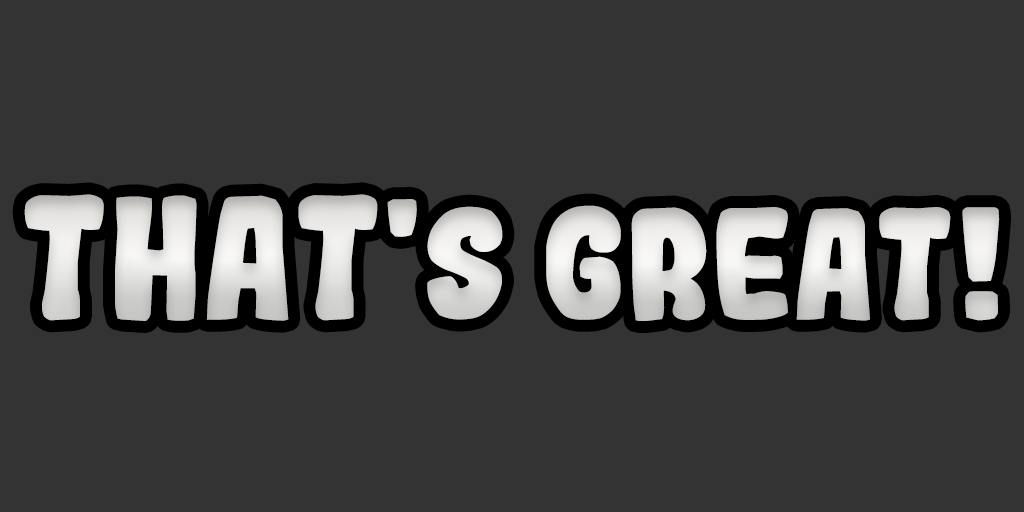
<style>
.page{position:relative;width:1024px;height:512px;background:#333333}
.page>*{position:absolute;margin:0}
.t1{font:150px "Gogono-Cocoa-Mochi";color:#dededc}
.t2{font:166.7px "Gogono-Cocoa-Mochi";color:#dededc}
</style>
<div class="page">
<p class="t1" style="left:24px;top:194px;width:976px;height:127px"><span class="t2">THAT</span>'S GREAT!</p>
</div>
